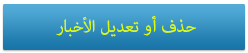
<style>
.page{position:relative;width:248px;height:53px}
.page>*{position:absolute;margin:0}
.t1{font:24px "AdobeArabic-Regular";color:#dafa05}
</style>
<div class="page">
<p class="t1" style="left:56px;top:16px;width:140px;height:21px">حذف أو تعديل الأخبار</p>
</div>
